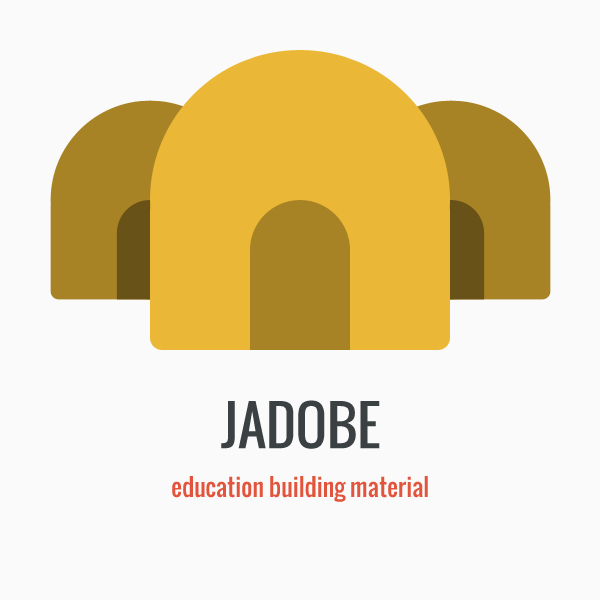
<style>
.page{position:relative;width:600px;height:600px;background:#fafafa}
.page>*{position:absolute;margin:0}
.t1{font:54px "Oswald-Regular";color:#3b4042}
.t2{font:24px "Oswald-Regular";color:#e3543c}
</style>
<div class="page">
<p class="t1" style="left:221px;top:400px;width:159px;height:49px">JADOBE</p>
<p class="t2" style="left:172px;top:476px;width:256px;height:26px">education building material</p>
</div>
